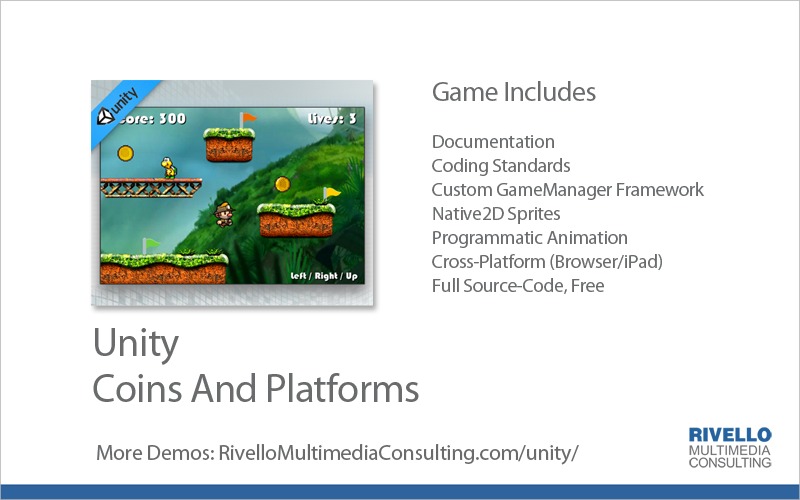
<style>
.page{position:relative;width:800px;height:500px;background:#ffffff}
.page>*{position:absolute;margin:0}
.t1{font:19.4px/23.9px "MyriadPro-Regular";letter-spacing:-0.02em;color:#696b6d}
.t2{font:27.8px/23.9px "MyriadPro-Regular";letter-spacing:-0.02em;color:#696b6d}
.t3{font:40.6px/46.7px "MyriadPro-Regular";letter-spacing:-0.02em;color:#696b6d}
.t4{font:22.2px "MyriadPro-Regular";letter-spacing:-0.02em;color:#696b6d}
</style>
<div class="page">
<p class="t1" style="left:432px;top:81px;width:273px;height:213px"><span class="t2">Game Includes <br></span><br>Documentation<br>Coding Standards<br>Custom GameManager Framework<br>Native2D Sprites<br>Programmatic Animation<br>Cross-Platform (Browser/iPad)<br>Full Source-Code, Free</p>
<p class="t3" style="left:93px;top:328px;width:326px;height:74px">Unity  <br>Coins And Platforms</p>
<p class="t4" style="left:97px;top:444px;width:482px;height:21px">More Demos: RivelloMultimediaConsulting.com/unity/</p>
</div>
